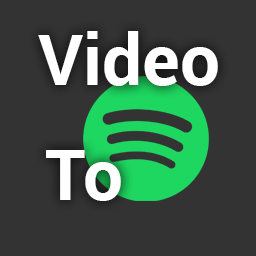
<style>
.page{position:relative;width:256px;height:256px;background:#333333}
.page>*{position:absolute;margin:0}
.t1{font:71px "Roboto-Bold";color:#ffffff}
</style>
<div class="page">
<p class="t1" style="left:38px;top:31px;width:180px;height:55px">Video</p>
<p class="t1" style="left:46px;top:150px;width:75px;height:51px">To</p>
</div>
